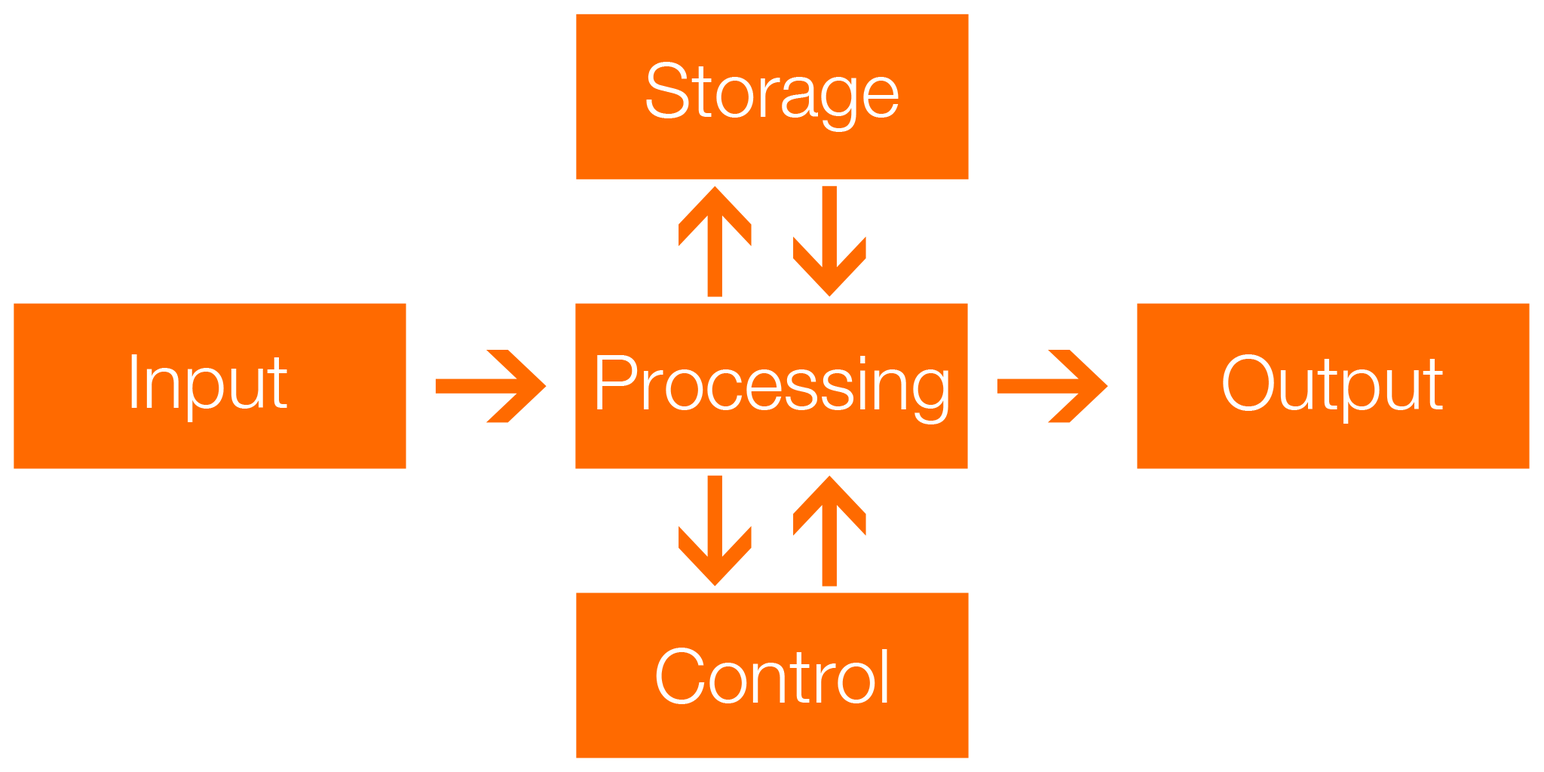
<style>
.page{position:relative;width:1544px;height:772px;background:#ffffff}
.page>*{position:absolute;margin:0}
.t1{font:75.4px "HelveticaNeue-Light";color:#ffffff}
</style>
<div class="page">
<p class="t1" style="left:646px;top:62px;width:253px;height:70px">Storage</p>
<p class="t1" style="left:131px;top:354px;width:156px;height:68px">Input</p>
<p class="t1" style="left:597px;top:355px;width:352px;height:70px">Processing</p>
<p class="t1" style="left:1223px;top:354px;width:220px;height:70px">Output</p>
<p class="t1" style="left:656px;top:648px;width:232px;height:56px">Control</p>
</div>
